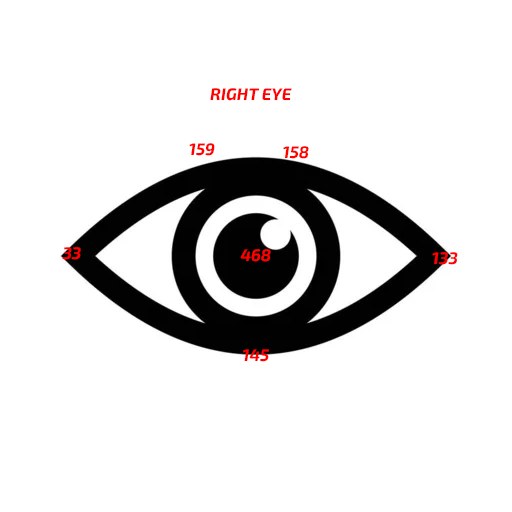
<style>
.page{position:relative;width:512px;height:512px;background:#ffffff}
.page>*{position:absolute;margin:0}
.t1{font:16.7px "Exo2Italic-BoldItalic";color:#ff0000;text-transform:uppercase}
</style>
<div class="page">
<p class="t1" style="left:210px;top:88px;width:82px;height:13px">RIGHT EYE</p>
<p class="t1" style="left:189px;top:143px;width:26px;height:13px">159</p>
<p class="t1" style="left:283px;top:146px;width:26px;height:13px">158</p>
<p class="t1" style="left:62px;top:247px;width:19px;height:13px">33</p>
<p class="t1" style="left:240px;top:249px;width:31px;height:13px">468</p>
<p class="t1" style="left:432px;top:252px;width:26px;height:13px">133</p>
<p class="t1" style="left:243px;top:349px;width:26px;height:13px">145</p>
</div>
